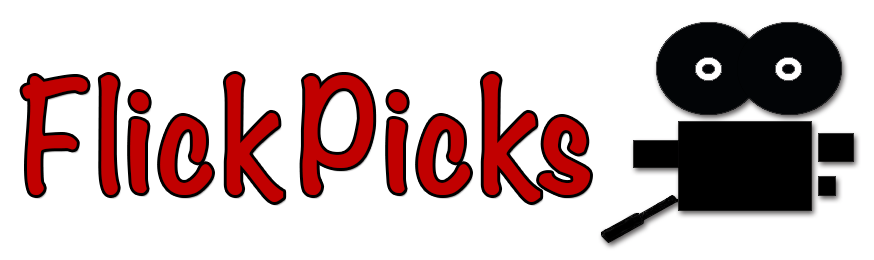
<style>
.page{position:relative;width:874px;height:260px;background:#ffffff}
.page>*{position:absolute;margin:0}
.t1{font:136px "Noteworthy-Bold";letter-spacing:0.05em;color:#c10000;scale:0.86 1}
.t2{font:136px "Noteworthy-Bold";letter-spacing:0.13em;color:#c10000;scale:0.86 1}
</style>
<div class="page">
<p class="t1" style="left:22px;top:74px;width:568px;height:128px">Flic<span class="t2">k</span>Picks</p>
</div>
